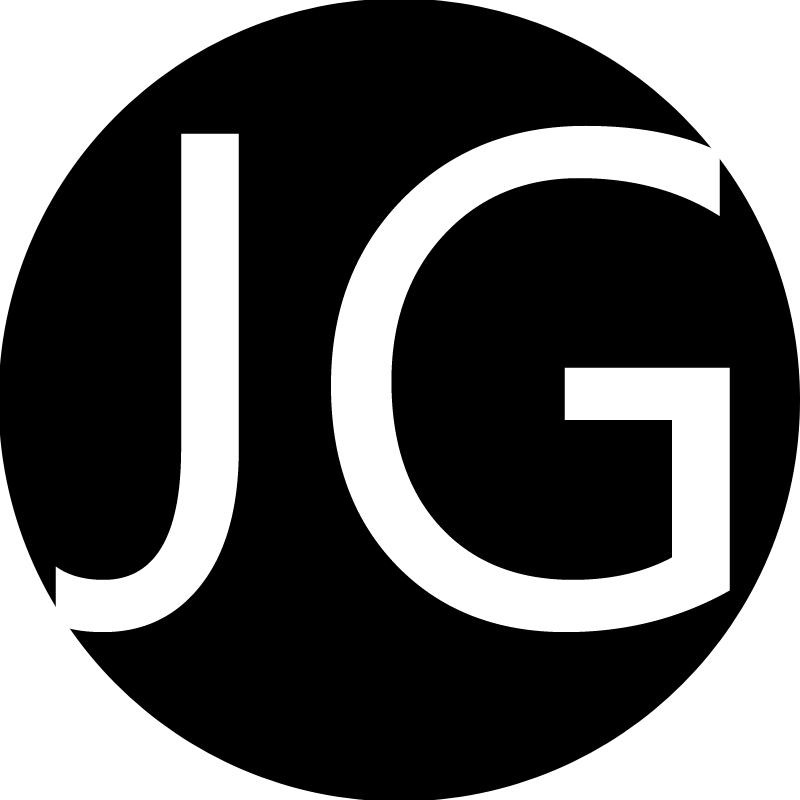
<style>
.page{position:relative;width:800px;height:800px;background:#000000}
.page>*{position:absolute;margin:0}
.t1{font:700px "Ebrima";color:#ffffff}
</style>
<div class="page">
<p class="t1" style="left:55px;top:125px;width:675px;height:507px">JG</p>
</div>
